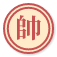
<style>
.page{position:relative;width:57px;height:57px;background:#ffeac9}
.page>*{position:absolute;margin:0}
.t1{font:26.8px "SourceHanSerifTC-Bold";color:#c75152}
</style>
<div class="page">
<p class="t1" style="left:17px;top:15px;width:24px;height:26px">帥</p>
</div>
